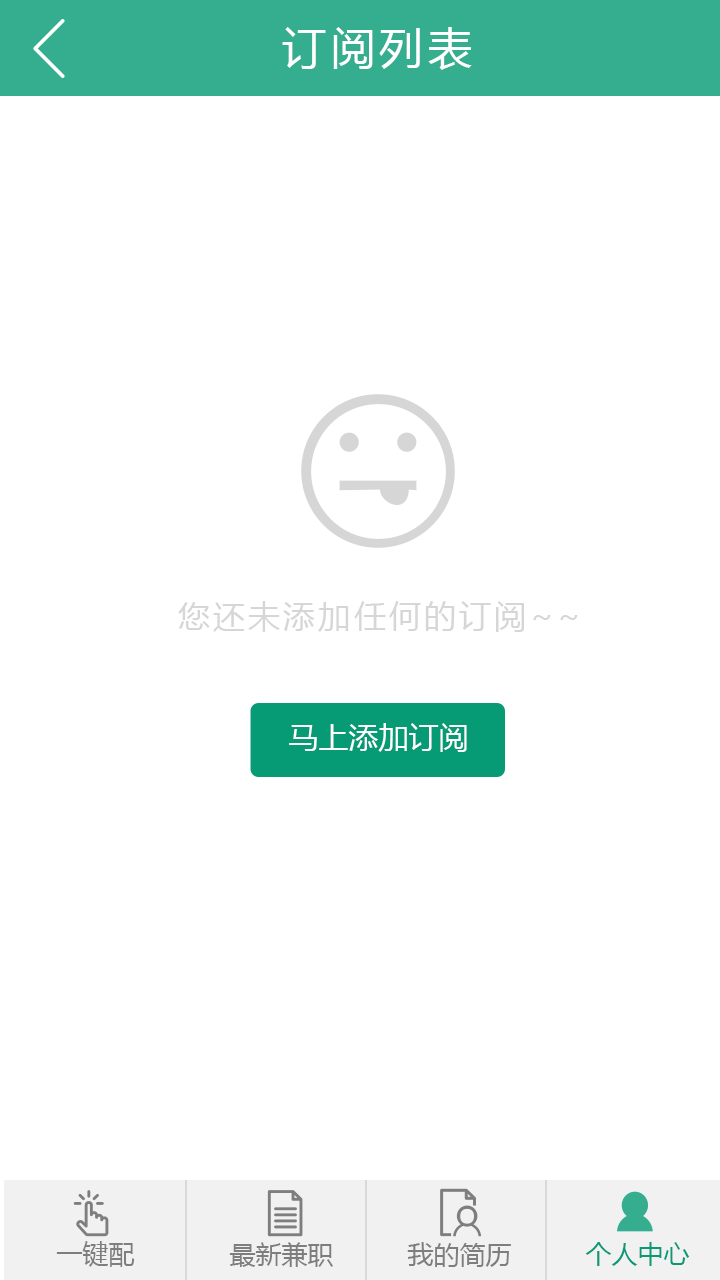
<style>
.page{position:relative;width:720px;height:1280px;background:#ffffff}
.page>*{position:absolute;margin:0}
.t1{font:44px "MicrosoftYaHei";letter-spacing:0.1em;color:#ffffff}
.t2{font:32px "MicrosoftYaHei";letter-spacing:0.1em;color:#d6d6d6}
.t3{font:30px "MicrosoftYaHei";color:#ffffff}
</style>
<div class="page">
<p class="t1" style="left:282px;top:27px;width:190px;height:43px">订阅列表</p>
<p class="t2" style="left:178px;top:601px;width:400px;height:31px">您还未添加任何的订阅~~</p>
<p class="t3" style="left:289px;top:723px;width:178px;height:29px">马上添加订阅</p>
</div>
